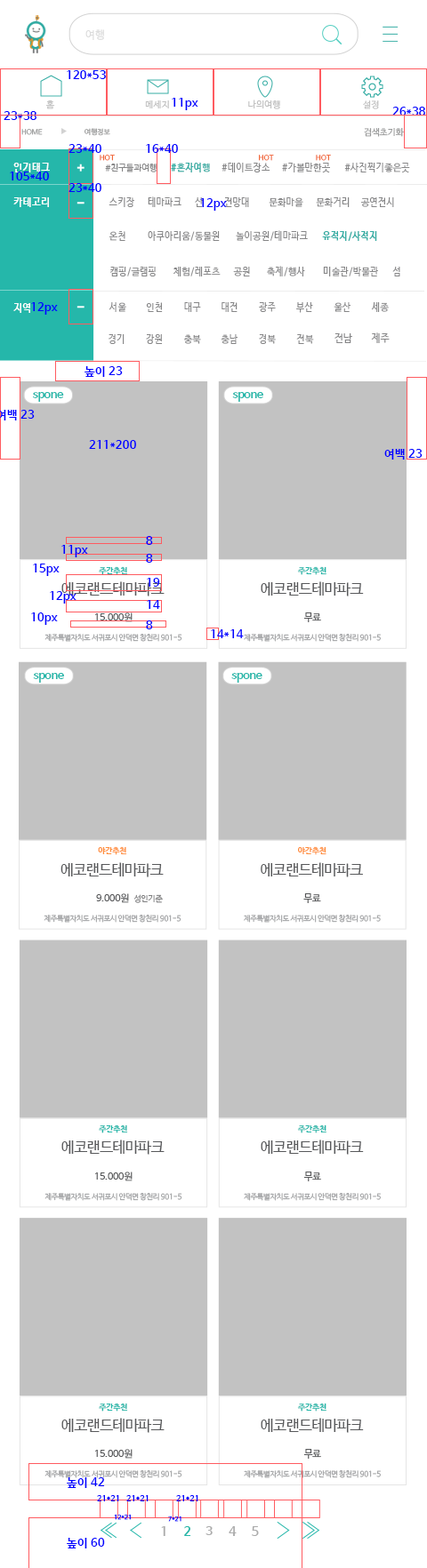
<style>
.page{position:relative;width:427px;height:1568px;background:#ffffff}
.page>*{position:absolute;margin:0}
.t1{font:10.7px "NanumBarunGothic";letter-spacing:0.025em;color:#dcdcdc}
.t2{font:11.6px "NanumBarunGothicBold";letter-spacing:0.025em;color:#0000ff}
.t3{font:8.9px "NanumBarunGothic";letter-spacing:0.025em;color:#bfbfbf}
.t4{font:7.1px "NanumBarunGothic";color:#999a9a}
.t5{font:8.9px "NanumBarunGothic";color:#999a9a}
.t6{font:7px "NanumBarunGothic";letter-spacing:0.025em}
.t7{font:10.2px "NanumBarunGothicBold";letter-spacing:0.025em;color:#ffffff}
.t8{font:8.6px "NanumBarunGothic";letter-spacing:0.025em;color:#868687}
.t9{font:9.4px "NanumBarunGothicBold";letter-spacing:0.025em;color:#36ada4}
.t10{font:9.4px "NanumBarunGothic";letter-spacing:0.025em;color:#868687}
.t11{font:9.8px "NanumBarunGothicBold";letter-spacing:0.025em;color:#ffffff}
.t12{font:9.8px "NanumBarunGothic";letter-spacing:0.025em;color:#868687}
.t13{font:11.9px "NanumBarunGothicBold";letter-spacing:-0.05em;color:#25b7aa}
.t14{font:8.2px "NanumBarunGothicBold";letter-spacing:-0.025em;color:#25b7aa}
.t15{font:14.7px "NanumBarunGothic";letter-spacing:-0.025em;color:#58595b}
.t16{font:9.7px "NanumBarunGothic";letter-spacing:-0.025em;color:#555658}
.t17{font:7.4px "NanumBarunGothic";letter-spacing:-0.025em;color:#a3a4a6}
.t18{font:8.2px "NanumBarunGothicBold";letter-spacing:-0.025em;color:#ff8f3c}
.t19{font:8.2px "NanumBarunGothic";letter-spacing:-0.025em;color:#7e7e7f}
.t20{font:8px "NanumBarunGothicBold";letter-spacing:0.025em;color:#0000ff}
.t21{font:6.2px "NanumBarunGothicBold";letter-spacing:0.025em;color:#0000ff}
.t22{font:6.2px "NanumBarunGothicBold";letter-spacing:0.025em}
.t23{font:12.5px "NanumBarunGothicBold";letter-spacing:-0.05em;color:#ababab}
.t24{font:12.5px "NanumBarunGothicBold";letter-spacing:-0.05em;color:#25b7aa}
</style>
<div class="page">
<p class="t1" style="left:85px;top:29px;width:19px;height:11px">여행</p>
<p class="t2" style="left:67px;top:70px;width:39px;height:9px">120*53</p>
<p class="t3" style="left:45px;top:100px;width:10px;height:9px">홈</p>
<p class="t3" style="left:145px;top:100px;width:24px;height:8px">메세지</p>
<p class="t2" style="left:172px;top:98px;width:26px;height:12px">11px</p>
<p class="t3" style="left:248px;top:100px;width:32px;height:9px">나의여행</p>
<p class="t3" style="left:363px;top:100px;width:16px;height:9px">설정</p>
<p class="t2" style="left:4px;top:111px;width:32px;height:9px">23*38</p>
<p class="t2" style="left:392px;top:107px;width:33px;height:9px">26*38</p>
<p class="t4" style="left:21px;top:129px;width:22px;height:6px">HOME</p>
<p class="t4" style="left:84px;top:128px;width:26px;height:8px">여행정보</p>
<p class="t5" style="left:364px;top:127px;width:40px;height:10px">검색초기화</p>
<p class="t2" style="left:68px;top:144px;width:33px;height:9px">23*40</p>
<p class="t2" style="left:146px;top:144px;width:32px;height:9px">16*40</p>
<p class="t6" style="left:100px;top:155px;width:15px;height:6px">HOT</p>
<p class="t6" style="left:259px;top:155px;width:15px;height:6px">HOT</p>
<p class="t6" style="left:316px;top:155px;width:15px;height:6px">HOT</p>
<p class="t2" style="left:10px;top:172px;width:39px;height:8px">105*40</p>
<p class="t7" style="left:13px;top:163px;width:37px;height:9px">인기태그</p>
<p class="t7" style="left:13px;top:163px;width:37px;height:9px">인기태그</p>
<p class="t8" style="left:105px;top:164px;width:51px;height:8px">#친구들과여행</p>
<p class="t9" style="left:171px;top:163px;width:39px;height:9px">#혼자여행</p>
<p class="t10" style="left:221px;top:163px;width:49px;height:9px">#데이트장소</p>
<p class="t10" style="left:282px;top:163px;width:48px;height:9px">#가볼만한곳</p>
<p class="t10" style="left:344px;top:163px;width:66px;height:9px">#사진찍기좋은곳</p>
<p class="t2" style="left:68px;top:183px;width:33px;height:9px">23*40</p>
<p class="t7" style="left:13px;top:197px;width:36px;height:10px">카테고리</p>
<p class="t10" style="left:108px;top:197px;width:26px;height:10px">스키장</p>
<p class="t10" style="left:148px;top:196px;width:33px;height:11px">테마파크</p>
<p class="t10" style="left:195px;top:197px;width:9px;height:10px">산</p>
<p class="t10" style="left:224px;top:197px;width:25px;height:10px">전망대</p>
<p class="t10" style="left:268px;top:197px;width:35px;height:10px">문화마을</p>
<p class="t10" style="left:316px;top:197px;width:33px;height:10px">문화거리</p>
<p class="t10" style="left:360px;top:197px;width:34px;height:10px">공연전시</p>
<p class="t2" style="left:200px;top:198px;width:27px;height:13px">12px</p>
<p class="t10" style="left:108px;top:231px;width:17px;height:10px">온천</p>
<p class="t10" style="left:148px;top:231px;width:72px;height:10px">아쿠아리움/동물원</p>
<p class="t10" style="left:236px;top:230px;width:72px;height:11px">놀이공원/테마파크</p>
<p class="t9" style="left:322px;top:231px;width:55px;height:10px">유적지/사적지</p>
<p class="t10" style="left:109px;top:267px;width:47px;height:9px">캠핑/글램핑</p>
<p class="t10" style="left:172px;top:267px;width:48px;height:9px">체험/레포츠</p>
<p class="t10" style="left:233px;top:267px;width:17px;height:9px">공원</p>
<p class="t10" style="left:267px;top:266px;width:38px;height:10px">축제/행사</p>
<p class="t10" style="left:323px;top:267px;width:55px;height:9px">미술관/박물관</p>
<p class="t10" style="left:392px;top:267px;width:8px;height:9px">섬</p>
<p class="t11" style="left:13px;top:303px;width:17px;height:10px">지역</p>
<p class="t2" style="left:31px;top:302px;width:27px;height:13px">12px</p>
<p class="t10" style="left:108px;top:302px;width:18px;height:10px">서울</p>
<p class="t10" style="left:146px;top:302px;width:17px;height:10px">인천</p>
<p class="t10" style="left:184px;top:302px;width:17px;height:10px">대구</p>
<p class="t10" style="left:221px;top:302px;width:16px;height:10px">대전</p>
<p class="t10" style="left:259px;top:302px;width:17px;height:10px">광주</p>
<p class="t10" style="left:296px;top:302px;width:17px;height:11px">부산</p>
<p class="t10" style="left:333px;top:302px;width:17px;height:10px">울산</p>
<p class="t10" style="left:371px;top:302px;width:17px;height:10px">세종</p>
<p class="t10" style="left:108px;top:334px;width:16px;height:10px">경기</p>
<p class="t10" style="left:146px;top:334px;width:16px;height:10px">강원</p>
<p class="t10" style="left:183px;top:334px;width:18px;height:10px">충북</p>
<p class="t10" style="left:220px;top:334px;width:17px;height:10px">충남</p>
<p class="t10" style="left:259px;top:334px;width:17px;height:10px">경북</p>
<p class="t10" style="left:296px;top:334px;width:18px;height:10px">전북</p>
<p class="t12" style="left:334px;top:333px;width:18px;height:10px">전남</p>
<p class="t12" style="left:371px;top:332px;width:18px;height:11px">제주</p>
<p class="t2" style="left:84px;top:366px;width:39px;height:11px">높이 23</p>
<p class="t13" style="left:33px;top:392px;width:31px;height:10px">spone</p>
<p class="t13" style="left:232px;top:392px;width:31px;height:10px">spone</p>
<p class="t2" style="left:89px;top:440px;width:47px;height:9px">211*200</p>
<p class="t2" style="left:384px;top:449px;width:38px;height:11px">여백 23</p>
<p class="t2" style="left:61px;top:545px;width:27px;height:12px">11px</p>
<p class="t2" style="left:146px;top:536px;width:7px;height:9px">8</p>
<p class="t2" style="left:146px;top:554px;width:7px;height:9px">8</p>
<p class="t2" style="left:33px;top:564px;width:27px;height:12px">15px</p>
<p class="t14" style="left:99px;top:566px;width:29px;height:9px">주간추천</p>
<p class="t14" style="left:297px;top:566px;width:29px;height:9px">주간추천</p>
<p class="t15" style="left:61px;top:581px;width:103px;height:15px">에코랜드테마파크</p>
<p class="t2" style="left:147px;top:578px;width:13px;height:9px">19</p>
<p class="t15" style="left:260px;top:581px;width:104px;height:15px">에코랜드테마파크</p>
<p class="t2" style="left:50px;top:591px;width:26px;height:13px">12px</p>
<p class="t2" style="left:147px;top:600px;width:13px;height:9px">14</p>
<p class="t2" style="left:31px;top:612px;width:27px;height:13px">10px</p>
<p class="t16" style="left:95px;top:612px;width:37px;height:10px">15.000원</p>
<p class="t16" style="left:303px;top:612px;width:18px;height:10px">무료</p>
<p class="t2" style="left:146px;top:620px;width:7px;height:9px">8</p>
<p class="t2" style="left:211px;top:629px;width:33px;height:9px">14*14</p>
<p class="t17" style="left:44px;top:634px;width:138px;height:8px">제주특별자치도 서귀포시 안덕면 창천리 901-5</p>
<p class="t17" style="left:244px;top:634px;width:136px;height:8px">제주특별자치도 서귀포시 안덕면 창천리 901-5</p>
<p class="t13" style="left:33px;top:673px;width:31px;height:10px">spone</p>
<p class="t13" style="left:231px;top:673px;width:31px;height:10px">spone</p>
<p class="t18" style="left:98px;top:846px;width:29px;height:9px">야간추천</p>
<p class="t18" style="left:298px;top:846px;width:28px;height:9px">야간추천</p>
<p class="t15" style="left:60px;top:862px;width:104px;height:15px">에코랜드테마파크</p>
<p class="t15" style="left:260px;top:862px;width:103px;height:15px">에코랜드테마파크</p>
<p class="t16" style="left:96px;top:893px;width:33px;height:10px">9.000원</p>
<p class="t16" style="left:303px;top:893px;width:18px;height:10px">무료</p>
<p class="t19" style="left:133px;top:894px;width:30px;height:9px">성인기준</p>
<p class="t17" style="left:44px;top:915px;width:137px;height:8px">제주특별자치도 서귀포시 안덕면 창천리 901-5</p>
<p class="t17" style="left:244px;top:915px;width:136px;height:8px">제주특별자치도 서귀포시 안덕면 창천리 901-5</p>
<p class="t14" style="left:99px;top:1124px;width:29px;height:9px">주간추천</p>
<p class="t14" style="left:297px;top:1124px;width:29px;height:9px">주간추천</p>
<p class="t15" style="left:61px;top:1140px;width:103px;height:15px">에코랜드테마파크</p>
<p class="t15" style="left:260px;top:1140px;width:104px;height:15px">에코랜드테마파크</p>
<p class="t16" style="left:95px;top:1172px;width:37px;height:9px">15.000원</p>
<p class="t16" style="left:303px;top:1172px;width:18px;height:9px">무료</p>
<p class="t17" style="left:44px;top:1193px;width:138px;height:8px">제주특별자치도 서귀포시 안덕면 창천리 901-5</p>
<p class="t17" style="left:244px;top:1193px;width:136px;height:8px">제주특별자치도 서귀포시 안덕면 창천리 901-5</p>
<p class="t14" style="left:99px;top:1403px;width:29px;height:9px">주간추천</p>
<p class="t14" style="left:297px;top:1403px;width:29px;height:9px">주간추천</p>
<p class="t15" style="left:61px;top:1418px;width:103px;height:15px">에코랜드테마파크</p>
<p class="t15" style="left:260px;top:1418px;width:104px;height:15px">에코랜드테마파크</p>
<p class="t16" style="left:95px;top:1449px;width:37px;height:10px">15.000원</p>
<p class="t16" style="left:303px;top:1449px;width:18px;height:10px">무료</p>
<p class="t17" style="left:44px;top:1470px;width:138px;height:8px">제주특별자치도 서귀포시 안덕면 창천리 901-5</p>
<p class="t2" style="left:67px;top:1477px;width:38px;height:11px">높이 42</p>
<p class="t17" style="left:244px;top:1470px;width:136px;height:8px">제주특별자치도 서귀포시 안덕면 창천리 901-5</p>
<p class="t20" style="left:97px;top:1495px;width:22px;height:6px">21*21</p>
<p class="t20" style="left:126px;top:1495px;width:22px;height:6px">21*21</p>
<p class="t20" style="left:176px;top:1495px;width:22px;height:6px">21*21</p>
<p class="t21" style="left:114px;top:1514px;width:17px;height:6px">12*21</p>
<p class="t22" style="left:168px;top:1516px;width:13px;height:6px">7*21</p>
<p class="t23" style="left:161px;top:1526px;width:4px;height:10px">1</p>
<p class="t24" style="left:184px;top:1526px;width:7px;height:10px">2</p>
<p class="t23" style="left:205px;top:1526px;width:7px;height:9px">3</p>
<p class="t23" style="left:228px;top:1526px;width:8px;height:10px">4</p>
<p class="t23" style="left:252px;top:1526px;width:7px;height:10px">5</p>
<p class="t2" style="left:67px;top:1538px;width:38px;height:10px">높이 60</p>
</div>
